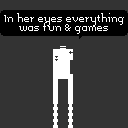
<style>
.page{position:relative;width:128px;height:128px;background:#333333}
.page>*{position:absolute;margin:0}
.t1{font:8px "Memoria";color:#ffffff}
</style>
<div class="page">
<p class="t1" style="left:4px;top:13px;width:120px;height:21px;text-align:center">In her eyes everything<br>was fun &amp; games</p>
</div>
